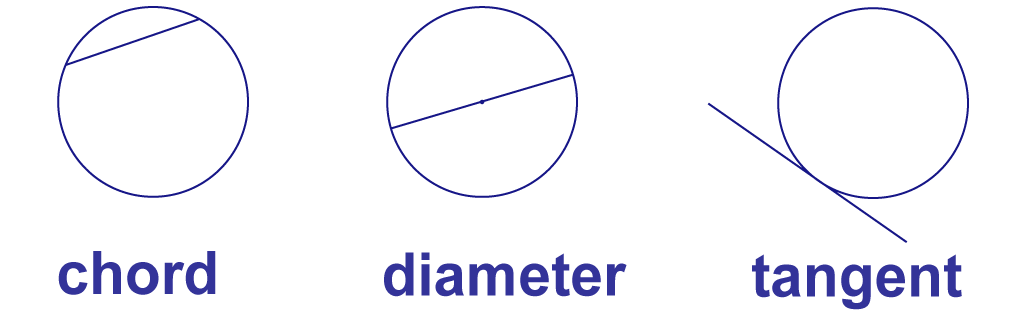
<style>
.page{position:relative;width:1024px;height:312px;background:#ffffff}
.page>*{position:absolute;margin:0}
.t1{font:60px "Arial-BoldMT";color:#333399}
</style>
<div class="page">
<p class="t1" style="left:58px;top:251px;width:158px;height:44px">chord</p>
<p class="t1" style="left:384px;top:252px;width:243px;height:45px">diameter</p>
<p class="t1" style="left:752px;top:254px;width:210px;height:56px">tangent</p>
</div>
